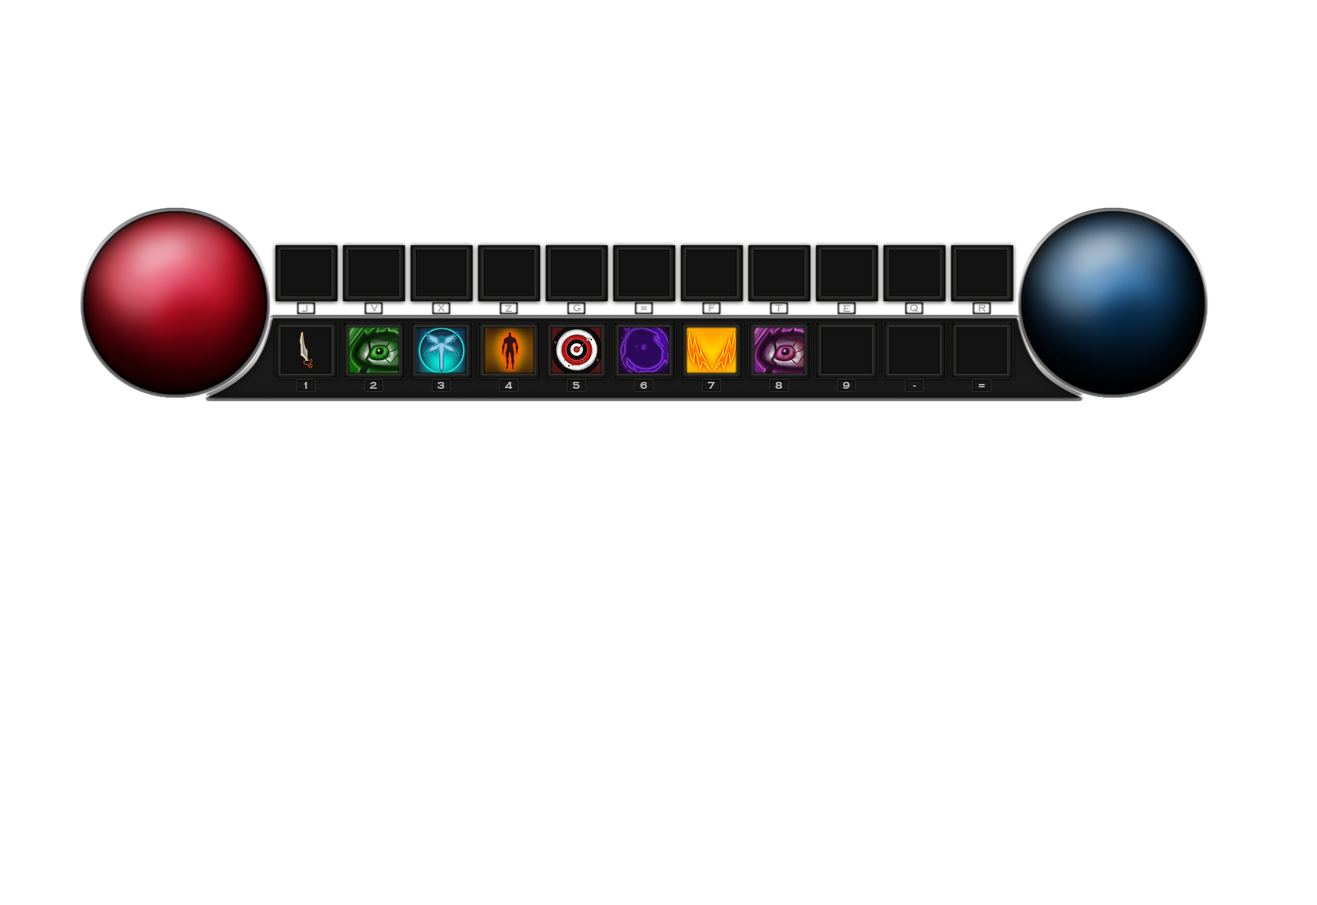
<style>
.page{position:relative;width:1317px;height:905px;background:#ffffff}
.page>*{position:absolute;margin:0}
.t1{font:10.3px "CopperplateGothic-Bold";color:#b3b1b1;font-variant:small-caps}
</style>
<div class="page">
<p class="t1" style="left:302px;top:305px;width:6px;height:7px">J</p>
<p class="t1" style="left:370px;top:305px;width:9px;height:6px">V</p>
<p class="t1" style="left:437px;top:305px;width:8px;height:6px">X</p>
<p class="t1" style="left:505px;top:305px;width:7px;height:7px">Z</p>
<p class="t1" style="left:573px;top:305px;width:9px;height:6px">G</p>
<p class="t1" style="left:708px;top:305px;width:7px;height:6px">F</p>
<p class="t1" style="left:775px;top:305px;width:8px;height:6px">T</p>
<p class="t1" style="left:843px;top:305px;width:8px;height:7px">E</p>
<p class="t1" style="left:910px;top:305px;width:8px;height:8px">Q</p>
<p class="t1" style="left:978px;top:305px;width:8px;height:6px">R</p>
<p class="t1" style="left:641px;top:307px;width:6px;height:3px">=</p>
<p class="t1" style="left:304px;top:382px;width:3px;height:7px">1</p>
<p class="t1" style="left:370px;top:382px;width:7px;height:8px">2</p>
<p class="t1" style="left:437px;top:382px;width:7px;height:7px">3</p>
<p class="t1" style="left:505px;top:382px;width:7px;height:7px">4</p>
<p class="t1" style="left:573px;top:382px;width:7px;height:7px">5</p>
<p class="t1" style="left:640px;top:382px;width:8px;height:7px">6</p>
<p class="t1" style="left:707px;top:382px;width:8px;height:7px">7</p>
<p class="t1" style="left:775px;top:382px;width:8px;height:7px">8</p>
<p class="t1" style="left:843px;top:382px;width:7px;height:7px">9</p>
<p class="t1" style="left:913px;top:385px;width:3px;height:2px">-</p>
<p class="t1" style="left:979px;top:384px;width:6px;height:4px">=</p>
</div>
